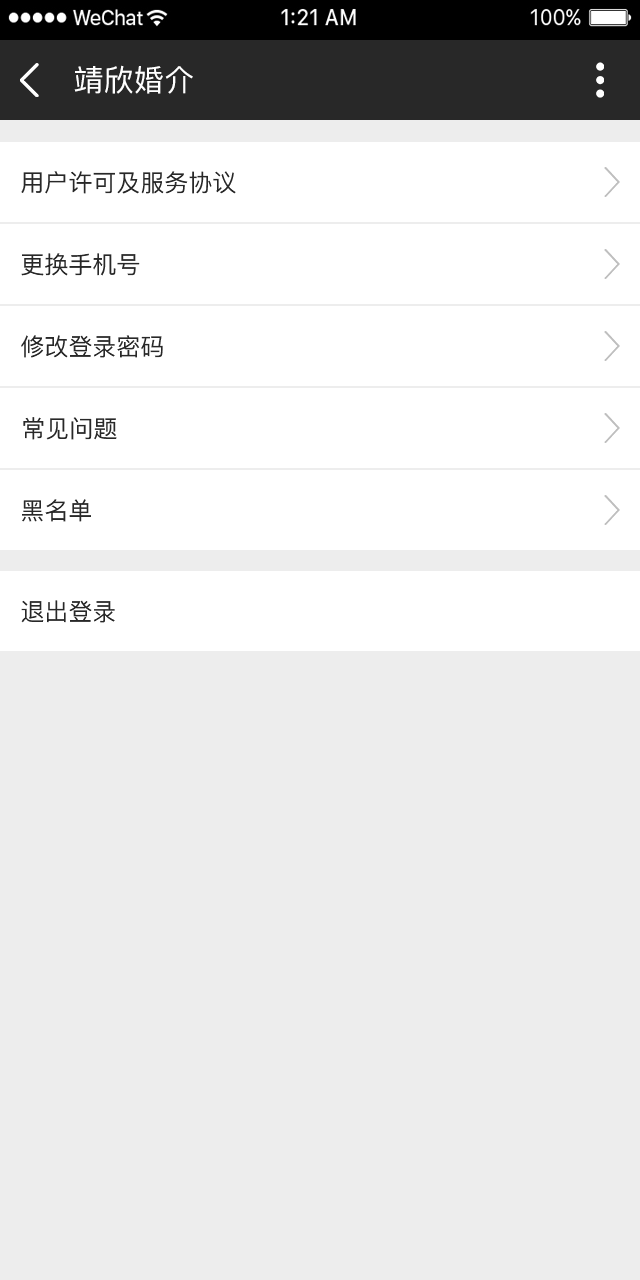
<style>
.page{position:relative;width:640px;height:1280px;background:#ededed}
.page>*{position:absolute;margin:0}
.t1{font:30px "PingFang-SC-Medium";letter-spacing:0.01em;color:#ffffff;text-transform:uppercase}
.t2{font:24px "PingFang-SC-Medium";color:#282828;text-transform:uppercase}
</style>
<div class="page">
<p class="t1" style="left:74px;top:65px;width:119px;height:29px">靖欣婚介</p>
<p class="t2" style="left:21px;top:171px;width:215px;height:23px">用户许可及服务协议</p>
<p class="t2" style="left:21px;top:253px;width:119px;height:23px">更换手机号</p>
<p class="t2" style="left:21px;top:335px;width:142px;height:23px">修改登录密码</p>
<p class="t2" style="left:23px;top:417px;width:94px;height:23px">常见问题</p>
<p class="t2" style="left:22px;top:499px;width:69px;height:23px">黑名单</p>
<p class="t2" style="left:21px;top:600px;width:94px;height:23px">退出登录</p>
</div>
